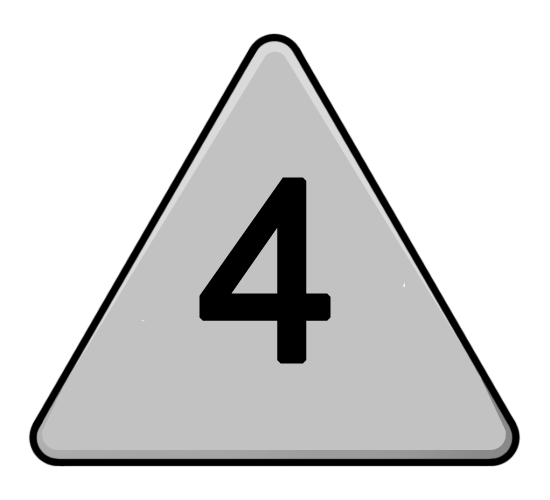
<style>
.page{position:relative;width:550px;height:500px;background:#ffffff}
.page>*{position:absolute;margin:0}
.t1{font:250px "ArialMT";color:#000000;font-weight:bold}
</style>
<div class="page">
<p class="t1" style="left:199px;top:177px;width:132px;height:187px">4</p>
</div>
